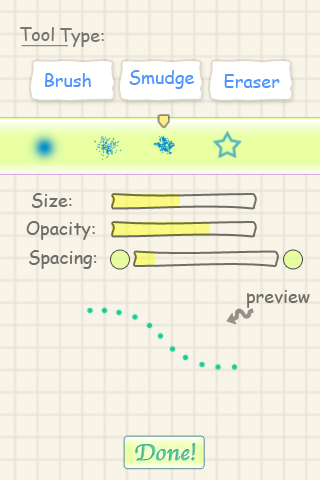
<style>
.page{position:relative;width:320px;height:480px;background:#f8f4e7}
.page>*{position:absolute;margin:0}
.t1{font:18px "ComicSansMS";color:#797775}
.t2{font:18px "ComicSansMS";color:#4f95ff}
.t3{font:18px "ComicSansMS";color:#706e68}
.t4{font:24px "Apple-Chancery";color:#50be93;font-weight:bold}
</style>
<div class="page">
<p class="t1" style="left:20px;top:27px;width:34px;height:14px">Tool</p>
<p class="t1" style="left:60px;top:28px;width:44px;height:19px">Type:</p>
<p class="t2" style="left:45px;top:73px;width:46px;height:14px">Brush</p>
<p class="t2" style="left:129px;top:70px;width:65px;height:19px">Smudge</p>
<p class="t2" style="left:224px;top:74px;width:56px;height:14px">Eraser</p>
<p class="t3" style="left:32px;top:193px;width:40px;height:15px">Size:</p>
<p class="t3" style="left:26px;top:221px;width:69px;height:19px">Opacity:</p>
<p class="t3" style="left:29px;top:250px;width:68px;height:19px">Spacing:</p>
<p class="t3" style="left:247px;top:290px;width:63px;height:18px">preview</p>
<p class="t4" style="left:135px;top:443px;width:61px;height:18px">Done!</p>
</div>
